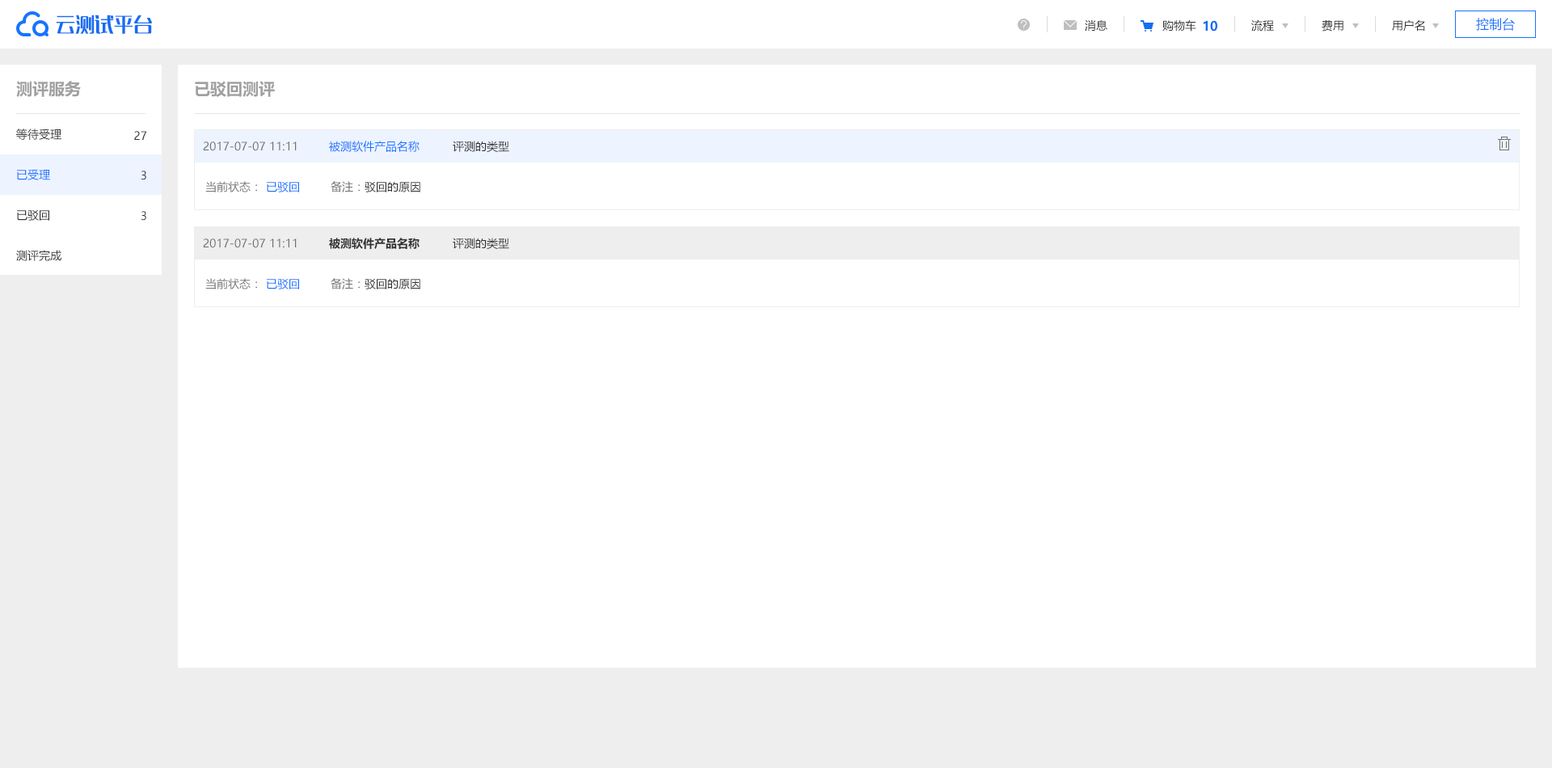
<style>
.page{position:relative;width:1552px;height:768px;background:#ffffff}
.page>*{position:absolute;margin:0}
.t1{font:19.4px "MFLangQian_Noncommercial-Regular";color:#136df3}
.t2{font:12.9px "MicrosoftYaHei";color:#1674ff}
.t3{font:11.3px "MicrosoftYaHei";color:#313131}
.t4{font:12.9px "MicrosoftYaHei-Bold";color:#136df3}
.t5{font:16.2px "MicrosoftYaHei-Bold";color:#a0a0a0}
.t6{font:11.3px "MicrosoftYaHei";color:#707070}
.t7{font:11.3px "MicrosoftYaHei";color:#1674ff}
.t8{font:11.3px "MicrosoftYaHei-Bold";color:#313131}
</style>
<div class="page">
<p class="t1" style="left:56px;top:15px;width:96px;height:19px">云测试平台</p>
<p class="t2" style="left:1476px;top:18px;width:39px;height:13px">控制台</p>
<p class="t3" style="left:1085px;top:19px;width:23px;height:13px">消息</p>
<p class="t3" style="left:1163px;top:19px;width:34px;height:13px">购物车</p>
<p class="t4" style="left:1203px;top:20px;width:15px;height:12px">10</p>
<p class="t3" style="left:1252px;top:19px;width:22px;height:13px">流程</p>
<p class="t3" style="left:1322px;top:20px;width:22px;height:12px">费用</p>
<p class="t3" style="left:1392px;top:19px;width:33px;height:13px">用户名</p>
<p class="t5" style="left:16px;top:81px;width:65px;height:16px">测评服务</p>
<p class="t5" style="left:195px;top:81px;width:80px;height:16px">已驳回测评</p>
<p class="t3" style="left:16px;top:129px;width:45px;height:11px">等待受理</p>
<p class="t3" style="left:134px;top:131px;width:13px;height:9px">27</p>
<p class="t6" style="left:203px;top:141px;width:94px;height:10px">2017-07-07 11:11</p>
<p class="t7" style="left:329px;top:141px;width:91px;height:11px">被测软件产品名称</p>
<p class="t3" style="left:453px;top:141px;width:56px;height:11px">评测的类型</p>
<p class="t7" style="left:17px;top:169px;width:33px;height:11px">已受理</p>
<p class="t3" style="left:141px;top:171px;width:5px;height:9px">3</p>
<p class="t6" style="left:205px;top:181px;width:52px;height:11px">当前状态：</p>
<p class="t7" style="left:267px;top:181px;width:32px;height:11px">已驳回</p>
<p class="t3" style="left:331px;top:181px;width:89px;height:11px"><span class="t6">备注：</span>驳回的原因</p>
<p class="t3" style="left:17px;top:209px;width:32px;height:12px">已驳回</p>
<p class="t3" style="left:141px;top:211px;width:5px;height:10px">3</p>
<p class="t6" style="left:203px;top:239px;width:94px;height:9px">2017-07-07 11:11</p>
<p class="t8" style="left:329px;top:238px;width:91px;height:11px">被测软件产品名称</p>
<p class="t3" style="left:453px;top:238px;width:56px;height:11px">评测的类型</p>
<p class="t3" style="left:16px;top:250px;width:45px;height:11px">测评完成</p>
<p class="t6" style="left:205px;top:278px;width:52px;height:11px">当前状态：</p>
<p class="t7" style="left:267px;top:278px;width:32px;height:11px">已驳回</p>
<p class="t3" style="left:331px;top:278px;width:89px;height:11px"><span class="t6">备注：</span>驳回的原因</p>
</div>
